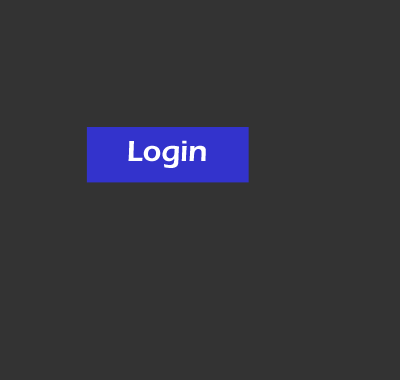
<style>
.page{position:relative;width:400px;height:380px;background:#333333}
.page>*{position:absolute;margin:0}
.t1{font:30px "ErasITC-Demi";color:#ffffff}
</style>
<div class="page">
<p class="t1" style="left:128px;top:140px;width:78px;height:28px">Login</p>
</div>
